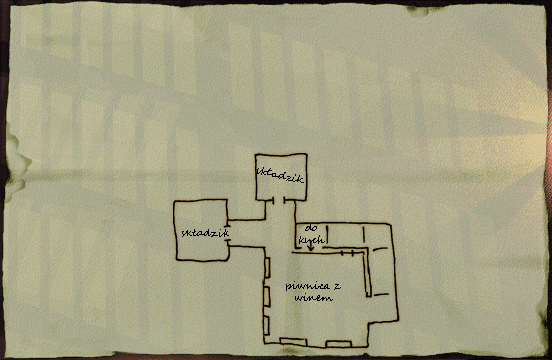
<style>
.page{position:relative;width:552px;height:360px}
.page>*{position:absolute;margin:0}
.t1{font:10px "SegoeScript";color:#000000}
</style>
<div class="page">
<p class="t1" style="left:256px;top:167px;width:48px;height:16px;rotate:13deg">składzik</p>
<p class="t1" style="left:182px;top:229px;width:47px;height:8px">składzik</p>
<p class="t1" style="left:299px;top:224px;width:26px;height:20px;text-align:center">do<br>kuch</p>
<p class="t1" style="left:286px;top:281px;width:55px;height:20px;text-align:center">piwnica z<br>winem</p>
</div>
